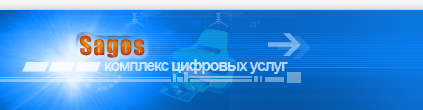
<style>
.page{position:relative;width:423px;height:110px}
.page>*{position:absolute;margin:0}
.t1{font:24px "Impact";letter-spacing:0.05em}
.t2{font:16px "Arial-BoldMT";letter-spacing:-0.08em;color:#c7def8}
</style>
<div class="page">
<p class="t1" style="left:80px;top:35px;width:65px;height:23px">Sagos</p>
<p class="t2" style="left:105px;top:59px;width:183px;height:15px">комплекс цифровых услуг</p>
</div>
